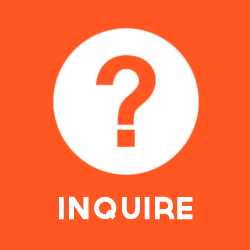
<style>
.page{position:relative;width:250px;height:250px;background:#ff5722}
.page>*{position:absolute;margin:0}
.t1{font:30px "Governor";color:#ffffff}
</style>
<div class="page">
<p class="t1" style="left:59px;top:196px;width:134px;height:24px">inQuire</p>
</div>
